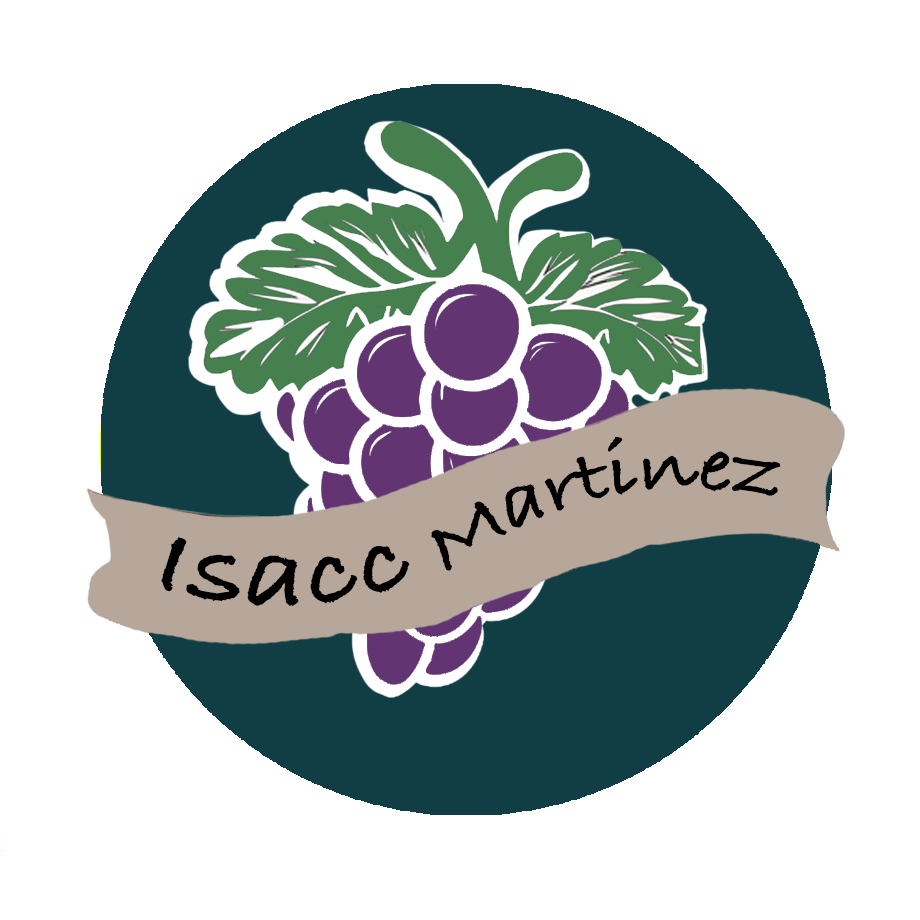
<style>
.page{position:relative;width:920px;height:920px;background:#ffffff}
.page>*{position:absolute;margin:0}
.t1{font:77.7px "BradleyHandITCTT-Bold";color:#000000}
.t2{font:102.4px "BradleyHandITCTT-Bold";color:#000000}
</style>
<div class="page">
<p class="t1" style="left:431px;top:436px;width:350px;height:135px;rotate:-13deg">Martinez</p>
<p class="t2" style="left:161px;top:537px;width:249px;height:70px;rotate:-1deg">Isacc</p>
</div>
